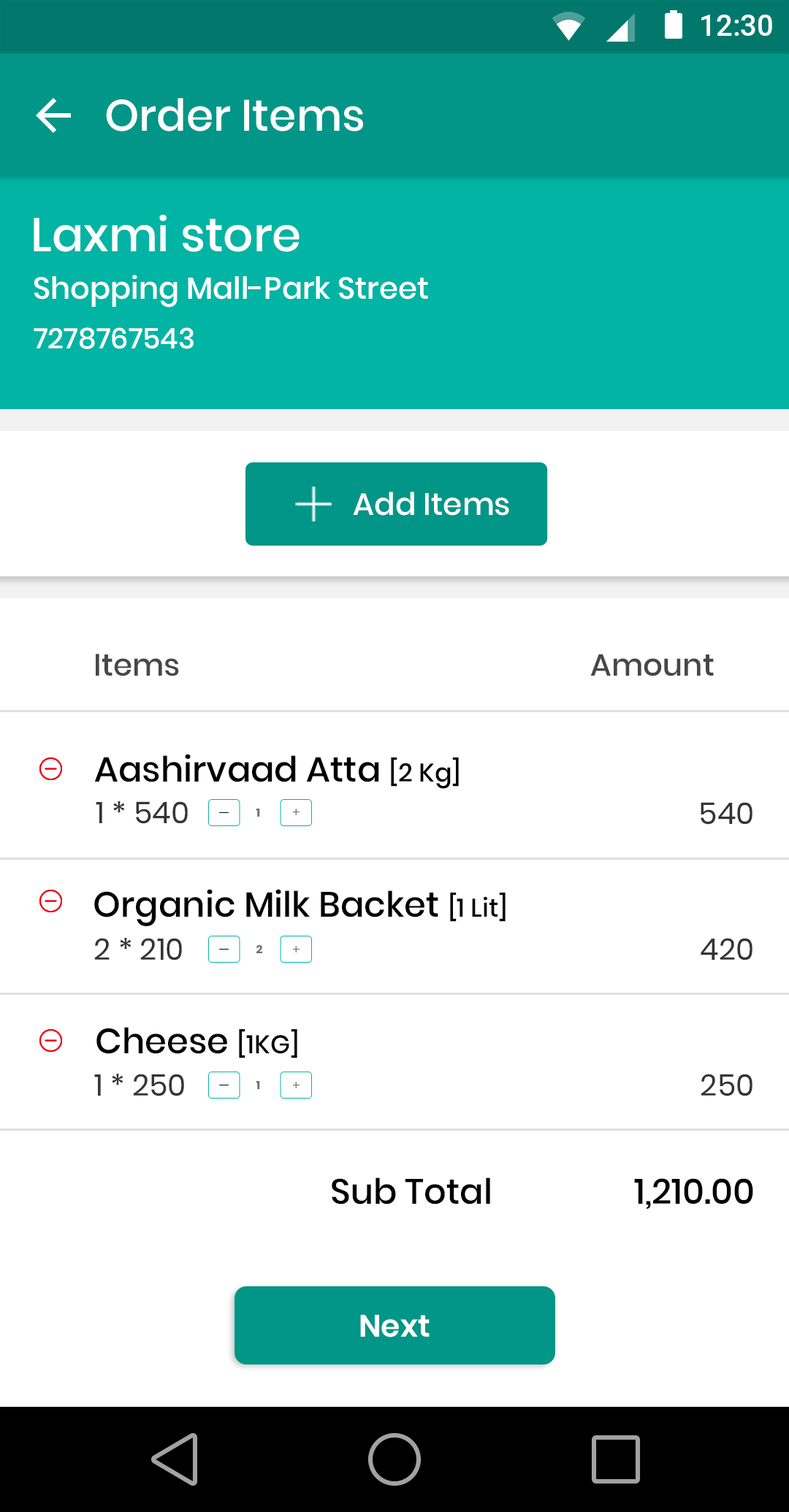
<style>
.page{position:relative;width:789px;height:1512px;background:#ffffff}
.page>*{position:absolute;margin:0}
.t1{font:30.1px "Roboto-Medium";color:#ffffff}
.t2{font:43.8px "Poppins-Medium";color:#ffffff}
.t3{font:47px "Poppins-Medium";color:#ffffff}
.t4{font:30.4px "Poppins-Medium";color:#ffffff}
.t5{font:28.4px "Poppins-Medium";color:#ffffff}
.t6{font:31px "Poppins-Medium";color:#ffffff}
.t7{font:30.7px "Poppins-Medium";color:#474747}
.t8{font:35.1px "Poppins-Medium";color:#000000}
.t9{font:25.6px "Poppins-Medium";color:#000000}
.t10{font:29.9px "Poppins-Regular";color:#353434}
.t11{font:11.3px "Poppins-Bold";color:#707070}
.t12{font:30.9px "Poppins-SemiBold";color:#ffffff}
</style>
<div class="page">
<p class="t1" style="left:701px;top:15px;width:71px;height:21px">12:30</p>
<p class="t2" style="left:106px;top:98px;width:257px;height:33px">Order Items</p>
<p class="t3" style="left:34px;top:215px;width:265px;height:37px">Laxmi store</p>
<p class="t4" style="left:34px;top:275px;width:394px;height:32px">Shopping Mall-Park Street</p>
<p class="t5" style="left:34px;top:327px;width:160px;height:22px">7278767543</p>
<p class="t6" style="left:353px;top:492px;width:156px;height:24px">Add Items</p>
<p class="t7" style="left:96px;top:654px;width:83px;height:22px">Items</p>
<p class="t7" style="left:590px;top:654px;width:124px;height:22px">Amount</p>
<p class="t8" style="left:94px;top:754px;width:365px;height:35px">Aashirvaad Atta <span class="t9">[2 Kg]</span></p>
<p class="t10" style="left:96px;top:801px;width:92px;height:23px">1 * 540</p>
<p class="t11" style="left:256px;top:808px;width:4px;height:9px">1</p>
<p class="t10" style="left:700px;top:802px;width:52px;height:23px">540</p>
<p class="t8" style="left:94px;top:889px;width:411px;height:37px">Organic Milk Backet <span class="t9">[1 Lit]</span></p>
<p class="t10" style="left:94px;top:938px;width:88px;height:22px">2 * 210</p>
<p class="t10" style="left:700px;top:938px;width:52px;height:22px">420</p>
<p class="t11" style="left:256px;top:944px;width:6px;height:9px">2</p>
<p class="t8" style="left:96px;top:1027px;width:201px;height:31px">Cheese <span class="t9">[1KG]</span></p>
<p class="t10" style="left:94px;top:1074px;width:90px;height:22px">1 * 250</p>
<p class="t10" style="left:700px;top:1074px;width:52px;height:22px">250</p>
<p class="t11" style="left:256px;top:1081px;width:4px;height:8px">1</p>
<p class="t8" style="left:332px;top:1177px;width:158px;height:27px">Sub Total</p>
<p class="t8" style="left:634px;top:1178px;width:119px;height:31px">1,210.00</p>
<p class="t12" style="left:360px;top:1315px;width:69px;height:22px">Next</p>
</div>
